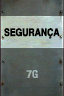
<style>
.page{position:relative;width:64px;height:96px}
.page>*{position:absolute;margin:0}
.t1{font:10.5px "Helvetica-Bold";letter-spacing:-0.03em;color:#000000;text-transform:uppercase;font-weight:bold;scale:0.82 1}
</style>
<div class="page">
<p class="t1" style="left:4px;top:28px;width:56px;height:11px">SEGURANÇA</p>
</div>
